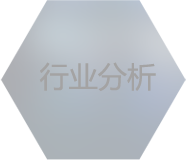
<style>
.page{position:relative;width:186px;height:160px;background:#ffffff}
.page>*{position:absolute;margin:0}
.t1{font:29.2px "MicrosoftYaHei";color:#a4a3a3}
</style>
<div class="page">
<p class="t1" style="left:39px;top:62px;width:117px;height:30px">行业分析</p>
</div>
